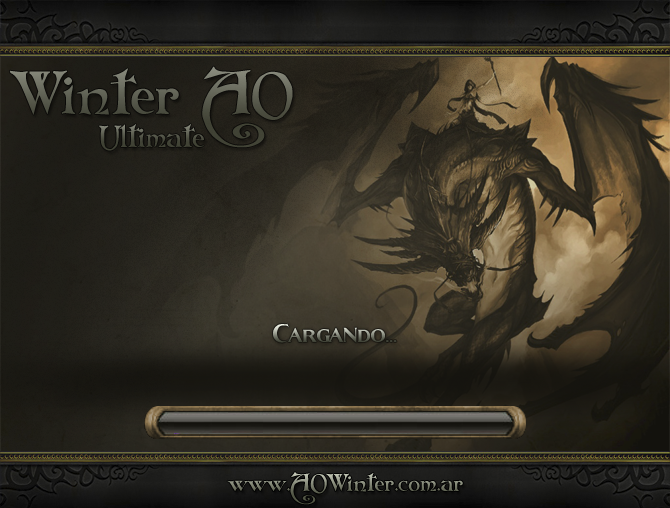
<style>
.page{position:relative;width:670px;height:508px}
.page>*{position:absolute;margin:0}
.t1{font:60px "Folkard"}
.t2{font:30px "Folkard";color:#4b4d40}
.t3{font:48.9px "Fleet-Street"}
.t4{font:24px "Folkard"}
</style>
<div class="page">
<p class="t1" style="left:9px;top:66px;width:284px;height:82px">Winter AO</p>
<p class="t2" style="left:99px;top:124px;width:105px;height:27px">Ultimate</p>
<p class="t3" style="left:273px;top:323px;width:124px;height:20px">Cargando...</p>
<p class="t4" style="left:227px;top:472px;width:236px;height:33px">www.AOWinter.com.ar</p>
</div>
